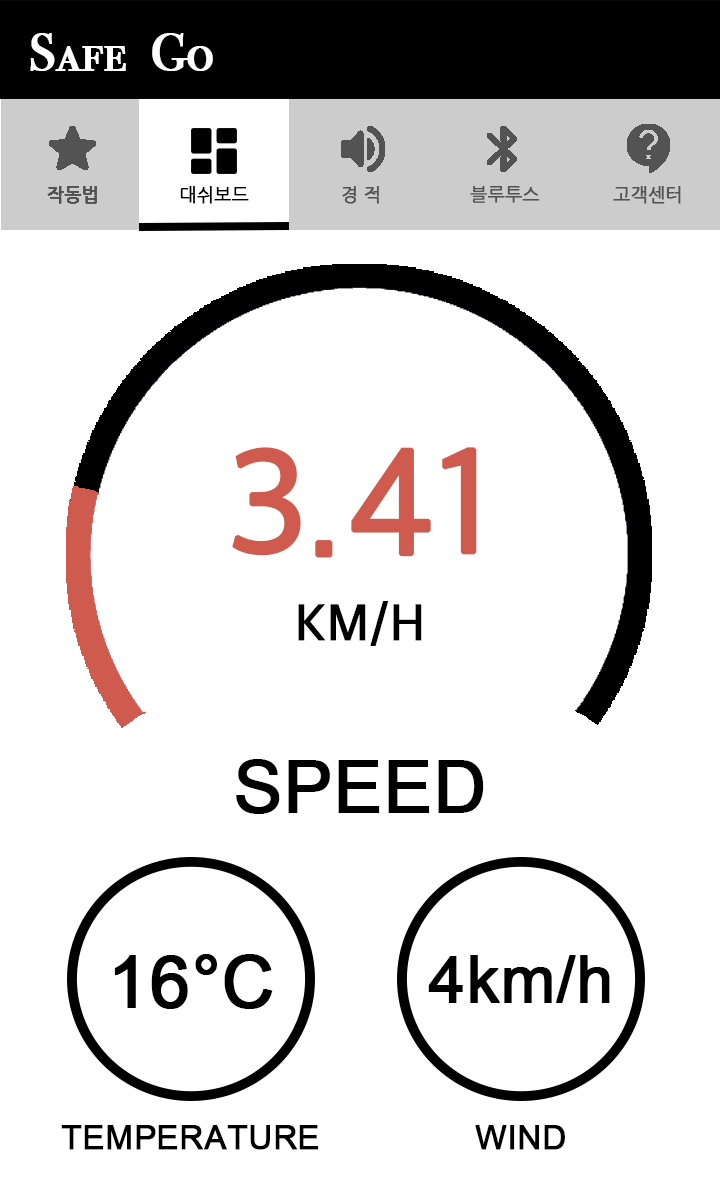
<style>
.page{position:relative;width:720px;height:1200px;background:#ffffff}
.page>*{position:absolute;margin:0}
.t1{font:53px "BodoniSvtyTwoSCITCTT-Book";color:#ffffff;font-weight:bold}
.t2{font:18px "NanumGothic";color:#535353;font-weight:bold}
.t3{font:18px "NanumGothic";color:#000000;font-weight:bold}
.t4{font:150px "AppleSDGothicNeo-Regular";color:#ce5b4d;font-weight:bold}
.t5{font:53px "AppleSDGothicNeo-Regular";color:#000000;font-weight:bold}
.t6{font:72px "ArialMT";color:#000000;font-weight:bold}
.t7{font:65px "ArialMT";color:#000000;font-weight:bold}
.t8{font:33px "ArialMT";color:#000000;font-weight:bold}
</style>
<div class="page">
<p class="t1" style="left:30px;top:33px;width:183px;height:38px">Safe  Go</p>
<p class="t2" style="left:47px;top:186px;width:50px;height:18px">작동법</p>
<p class="t3" style="left:180px;top:186px;width:69px;height:18px">대쉬보드</p>
<p class="t4" style="left:232px;top:447px;width:245px;height:111px">3.41</p>
<p class="t5" style="left:298px;top:601px;width:124px;height:45px">KM/H</p>
<p class="t6" style="left:236px;top:759px;width:248px;height:55px">SPEED</p>
<p class="t6" style="left:114px;top:954px;width:159px;height:55px">16°C</p>
<p class="t7" style="left:428px;top:955px;width:182px;height:48px">4km/h</p>
<p class="t8" style="left:61px;top:1125px;width:258px;height:25px">TEMPERATURE</p>
<p class="t8" style="left:475px;top:1125px;width:90px;height:25px">WIND</p>
</div>
